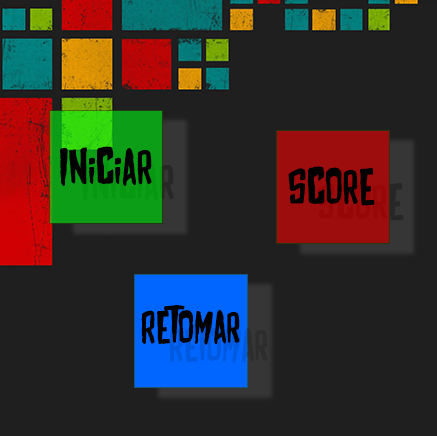
<style>
.page{position:relative;width:437px;height:436px;background:#1f1f1f}
.page>*{position:absolute;margin:0}
.t1{font:48px "MAYHEM-Regular";color:#000000}
.t2{font:43.3px "MAYHEM-Regular";color:#000000}
</style>
<div class="page">
<p class="t1" style="left:60px;top:146px;width:92px;height:40px">Iniciar</p>
<p class="t1" style="left:288px;top:166px;width:87px;height:40px">Score</p>
<p class="t2" style="left:141px;top:305px;width:99px;height:40px">Retomar</p>
</div>
